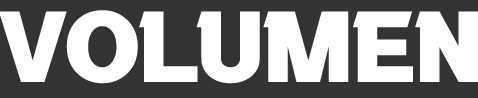
<style>
.page{position:relative;width:478px;height:98px;background:#333333}
.page>*{position:absolute;margin:0}
.t1{font:96px "aBlackLives";color:#ffffff}
</style>
<div class="page">
<p class="t1" style="left:0px;top:10px;width:479px;height:74px">Volumen</p>
</div>
